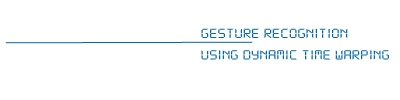
<style>
.page{position:relative;width:400px;height:100px;background:#ffffff}
.page>*{position:absolute;margin:0}
.t1{font:14.4px "DS-Digital";letter-spacing:-0.02em;color:#0067a5;scale:1.25 1}
</style>
<div class="page">
<p class="t1" style="left:201px;top:28px;width:188px;height:32px">gesture recognition<br>using dynamic time warping</p>
</div>
